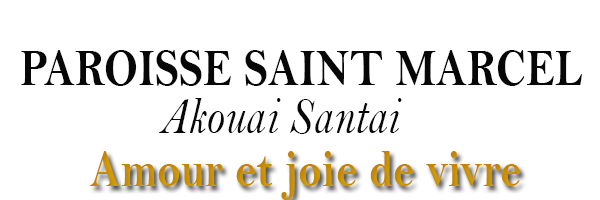
<style>
.page{position:relative;width:600px;height:200px;background:#ffffff}
.page>*{position:absolute;margin:0}
.t1{font:53.2px "BellMTBold";color:#070707;scale:0.83 1}
.t2{font:53.2px "BellMTItalic";color:#070707;scale:0.83 1}
.t3{font:53.2px "BellMTBold";color:#d0a00c;scale:0.83 1}
</style>
<div class="page">
<p class="t1" style="left:21px;top:50px;width:561px;height:36px">PAROISSE SAINT MARCEL</p>
<p class="t2" style="left:159px;top:98px;width:243px;height:36px">Akouai Santai</p>
<p class="t3" style="left:90px;top:151px;width:430px;height:49px">Amour et joie de vivre</p>
</div>
